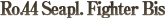
<style>
.page{position:relative;width:165px;height:18px;background:#ffffff}
.page>*{position:absolute;margin:0}
.t1{font:18px "RyuminPro-ExBold";letter-spacing:-0.08em;color:#4a3f32;font-weight:bold;scale:0.9 1}
</style>
<div class="page">
<p class="t1" style="left:0px;top:1px;width:166px;height:18px">Ro.44 Seapl. Fighter Bis</p>
</div>
